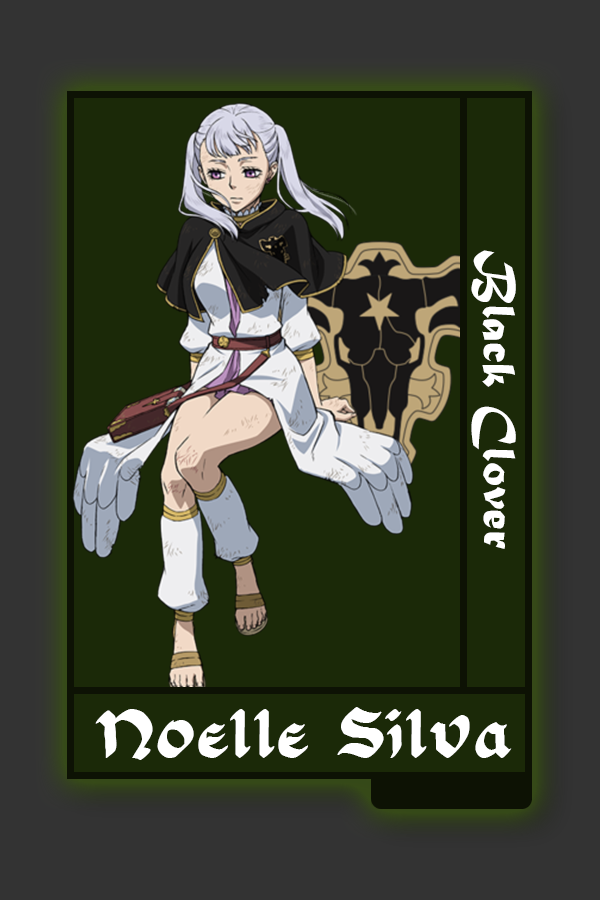
<style>
.page{position:relative;width:600px;height:900px;background:#1b2908}
.page>*{position:absolute;margin:0}
.t1{font:48.8px "MaturaMTScriptCapitals";color:#ffffff}
.t2{font:60.3px "FloranteatLaura";color:#ffffff}
</style>
<div class="page">
<p class="t1" style="left:471px;top:250px;width:45px;height:299px;rotate:90deg">Black Clover</p>
<p class="t2" style="left:95px;top:707px;width:417px;height:53px">Noelle Silva</p>
</div>
